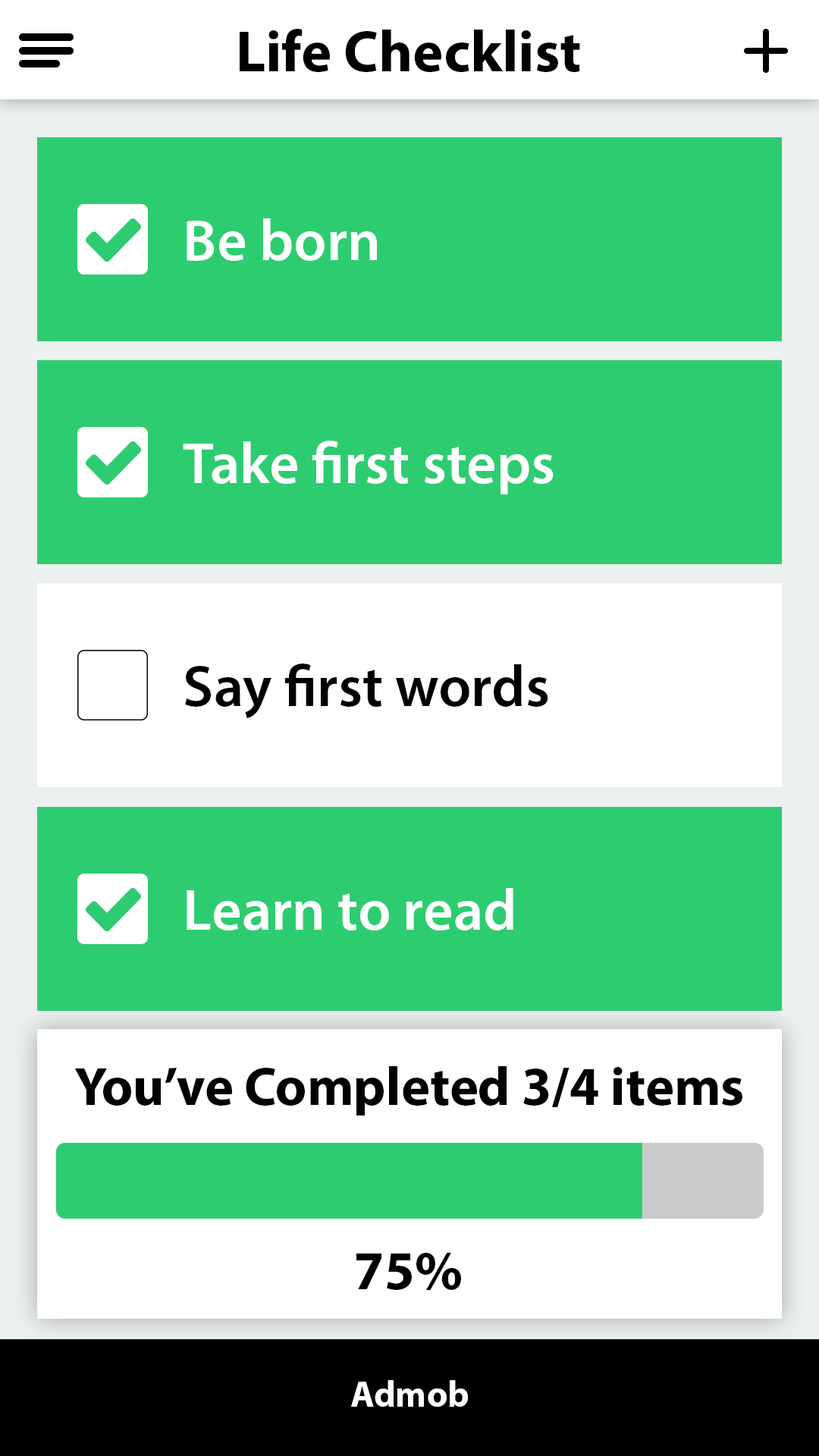
<style>
.page{position:relative;width:819px;height:1456px;background:#2ecc71}
.page>*{position:absolute;margin:0}
.t1{font:58.5px "MyriadPro-Bold";color:#000000}
.t2{font:58.5px "MyriadPro-Semibold";color:#ffffff}
.t3{font:58.5px "MyriadPro-Semibold";color:#000000}
.t4{font:54.3px "MyriadPro-Bold";color:#000000}
.t5{font:36.4px "MyriadPro-Bold";color:#ffffff}
</style>
<div class="page">
<p class="t1" style="left:240px;top:29px;width:340px;height:43px">Life Checklist</p>
<p class="t2" style="left:187px;top:218px;width:190px;height:43px">Be born</p>
<p class="t2" style="left:183px;top:441px;width:371px;height:53px">Take first steps</p>
<p class="t3" style="left:185px;top:664px;width:363px;height:54px">Say first words</p>
<p class="t2" style="left:187px;top:888px;width:326px;height:42px">Learn to read</p>
<p class="t4" style="left:74px;top:1066px;width:668px;height:49px">You’ve Completed 3/4 items</p>
<p class="t4" style="left:356px;top:1253px;width:105px;height:38px">75%</p>
<p class="t5" style="left:351px;top:1380px;width:117px;height:27px">Admob</p>
</div>
